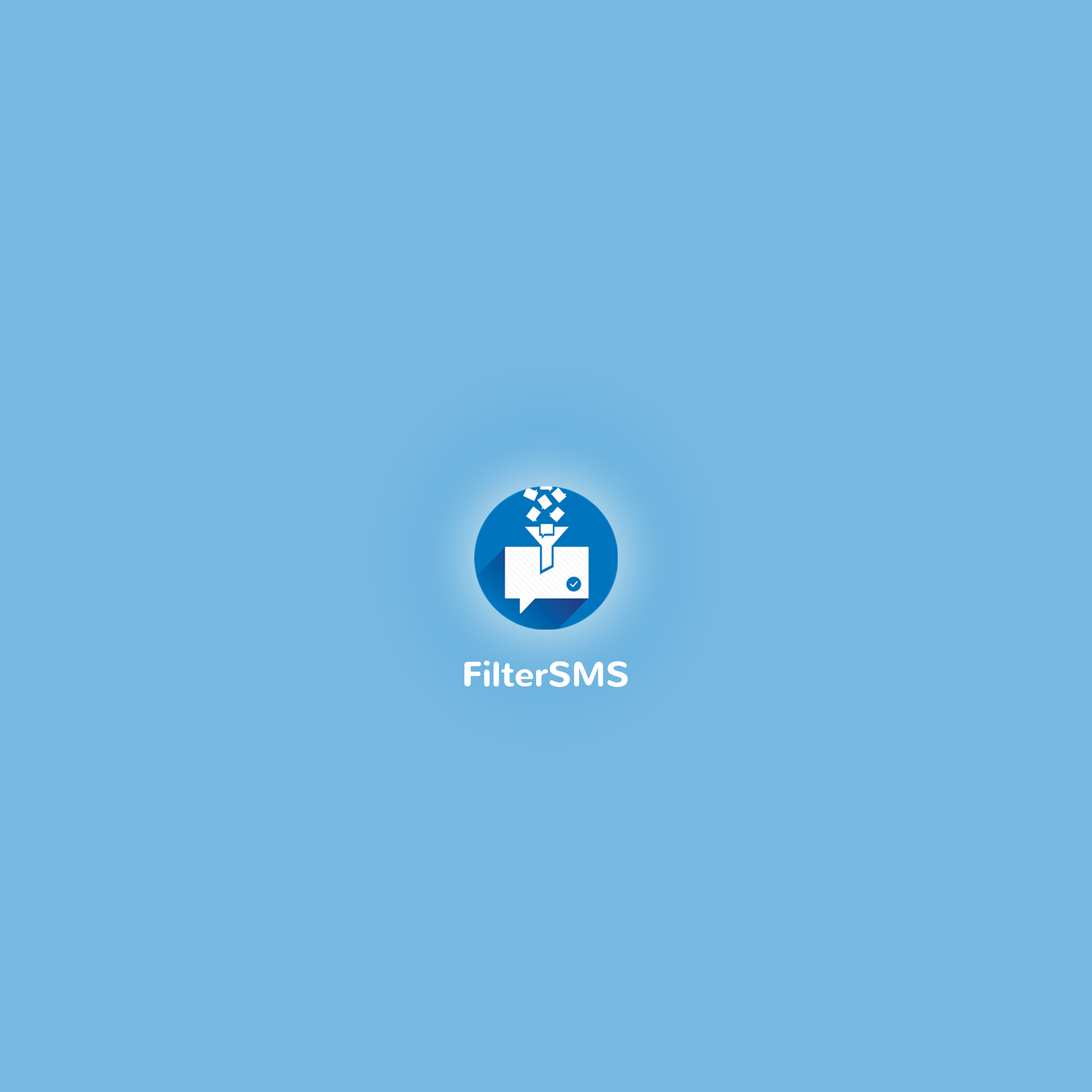
<style>
.page{position:relative;width:1092px;height:1092px;background:#78b9e2}
.page>*{position:absolute;margin:0}
.t1{font:34.6px "Nunito-Bold";color:#ffffff}
</style>
<div class="page">
<p class="t1" style="left:464px;top:661px;width:164px;height:26px">FilterSMS</p>
</div>
